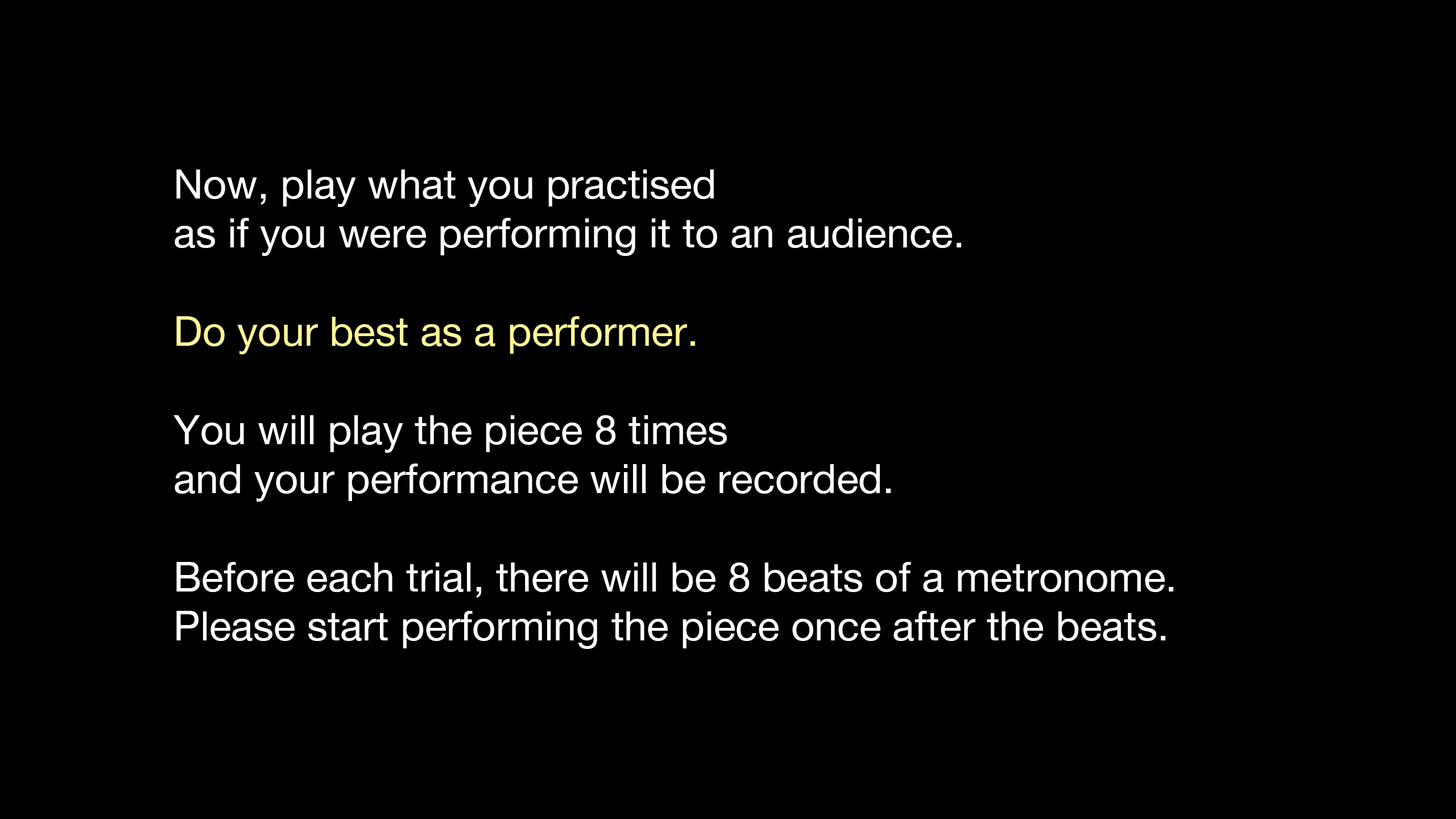
<style>
.page{position:relative;width:1456px;height:819px;background:#000000}
.page>*{position:absolute;margin:0}
.t1{font:40.9px "HelveticaNeue";color:#ffffff}
.t2{font:40.9px "HelveticaNeue";color:#fff799}
</style>
<div class="page">
<p class="t1" style="left:173px;top:169px;width:1000px;height:480px">Now, play what you practised<br>as if you were performing it to an audience.<br><br><span class="t2">Do your best as a performer.<br></span><br>You will play the piece 8 times<br>and your performance will be recorded.<br><br>Before each trial, there will be 8 beats of a metronome.<br>Please start performing the piece once after the beats.</p>
</div>
